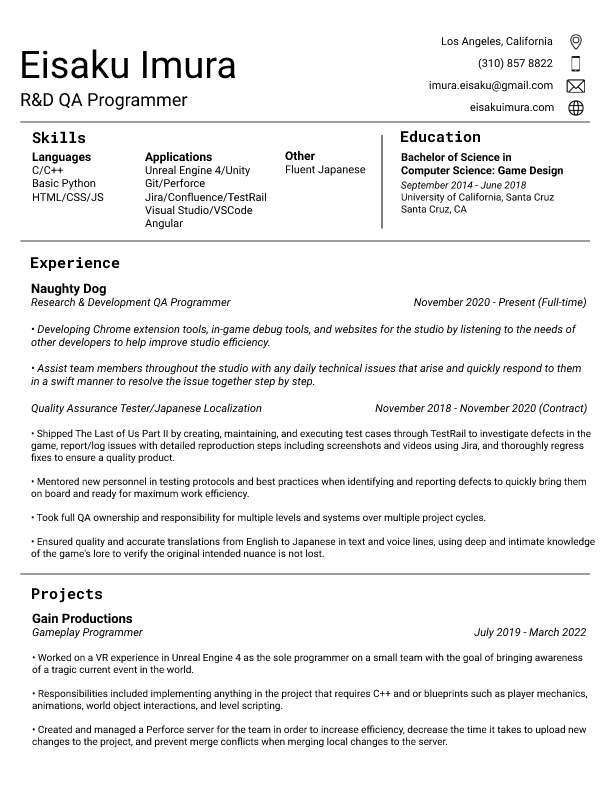
<style>
.page{position:relative;width:612px;height:792px;background:#ffffff}
.page>*{position:absolute;margin:0}
.t1{font:11px "Roboto-Regular";color:#000000}
.t2{font:38px "Roboto-Regular";color:#000000}
.t3{font:18px "Roboto-Regular";color:#000000}
.t4{font:15px "RobotoMono-Bold";color:#000000}
.t5{font:12px "Roboto-Bold";color:#000000}
.t6{font:11px "Roboto-Bold";color:#000000}
.t7{font:10px "Roboto-Italic";color:#000000}
.t8{font:10px "Roboto-Regular";color:#000000}
.t9{font:13px "Roboto-Bold";color:#000000}
.t10{font:11px "Roboto-Italic";color:#000000}
</style>
<div class="page">
<p class="t1" style="left:442px;top:36px;width:111px;height:12px">Los Angeles, California</p>
<p class="t2" style="left:22px;top:49px;width:213px;height:30px">Eisaku Imura</p>
<p class="t1" style="left:478px;top:58px;width:75px;height:12px">(310) 857 8822</p>
<p class="t1" style="left:429px;top:80px;width:124px;height:12px">imura.eisaku@gmail.com</p>
<p class="t3" style="left:21px;top:93px;width:167px;height:17px">R&amp;D QA Programmer</p>
<p class="t1" style="left:470px;top:102px;width:84px;height:9px">eisakuimura.com</p>
<p class="t4" style="left:32px;top:131px;width:53px;height:13px">Skills</p>
<p class="t4" style="left:401px;top:130px;width:79px;height:13px">Education</p>
<p class="t1" style="left:32px;top:152px;width:72px;height:50px"><span class="t5">Languages<br></span>C/C++<br>Basic Python<br>HTML/CSS/JS</p>
<p class="t1" style="left:145px;top:152px;width:121px;height:78px"><span class="t5">Applications<br></span>Unreal Engine 4/Unity<br>Git/Perforce<br>Jira/Confluence/TestRail<br>Visual Studio/VSCode<br>Angular</p>
<p class="t1" style="left:285px;top:151px;width:81px;height:25px"><span class="t5">Other<br></span>Fluent Japanese</p>
<p class="t6" style="left:401px;top:152px;width:162px;height:63px">Bachelor of Science in <br>Computer Science: Game Design<br><span class="t7">September 2014 - June 2018<br></span><span class="t8">University of California, Santa Cruz<br>Santa Cruz, CA</span></p>
<p class="t4" style="left:31px;top:257px;width:89px;height:14px">Experience</p>
<p class="t8" style="left:31px;top:283px;width:564px;height:277px"><span class="t9">Naughty Dog<br></span><span class="t10">Research &amp; Development QA Programmer                                                                    November 2020 - Present (Full-time)<br><br>• Developing Chrome extension tools, in-game debug tools, and websites for the studio by listening to the needs of <br>other developers to help improve studio efficiency.<br><br>• Assist team members throughout the studio with any daily technical issues that arise and quickly respond to them <br>in a swift manner to resolve the issue together step by step.<br><br>Quality Assurance Tester/Japanese Localization                                          November 2018 - November 2020 (Contract)<br><br></span>• Shipped The Last of Us Part II by creating, maintaining, and executing test cases through TestRail to investigate defects in the <br>game, report/log issues with detailed reproduction steps including screenshots and videos using Jira, and thoroughly regress<br>fixes to ensure a quality product.<br><br>• Mentored new personnel in testing protocols and best practices when identifying and reporting defects to quickly bring them <br>on board and ready for maximum work efficiency.<br><br>• Took full QA ownership and responsibility for multiple levels and systems over multiple project cycles.<br><br>• Ensured quality and accurate translations from English to Japanese in text and voice lines, using deep and intimate knowledge<br>of the game's lore to verify the original intended nuance is not lost.</p>
<p class="t4" style="left:32px;top:588px;width:70px;height:15px">Projects</p>
<p class="t8" style="left:32px;top:613px;width:555px;height:135px"><span class="t9">Gain Productions<br></span><span class="t10">Gameplay Programmer                                                                                                                           July 2019 - March 2022<br><br></span>• Worked on a VR experience in Unreal Engine 4 as the sole programmer on a small team with the goal of bringing awareness<br>of a tragic current event in the world.<br><br>• Responsibilities included implementing anything in the project that requires C++ and or blueprints such as player mechanics, <br>animations, world object interactions, and level scripting.<br><br>• Created and managed a Perforce server for the team in order to increase efficiency, decrease the time it takes to upload new <br>changes to the project, and prevent merge conflicts when merging local changes to the server.</p>
</div>
